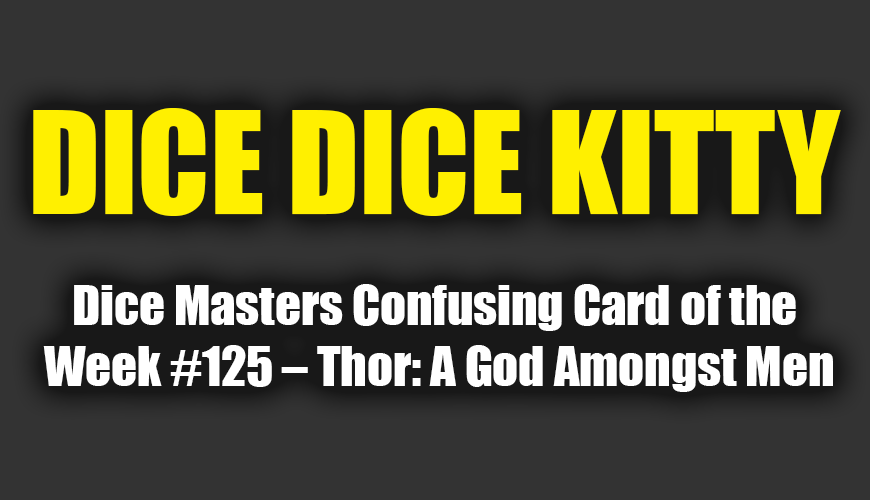
<style>
.page{position:relative;width:870px;height:500px;background:#333333}
.page>*{position:absolute;margin:0}
.t1{font:130.7px "Impact";color:#fff000}
.t2{font:50.7px "Impact";color:#ffffff}
</style>
<div class="page">
<p class="t1" style="left:33px;top:108px;width:808px;height:108px">DICE DICE KITTY</p>
<p class="t2" style="left:43px;top:284px;width:790px;height:108px;text-align:center">Dice Masters Confusing Card of the <br>Week #125 – Thor: A God Amongst Men</p>
</div>
